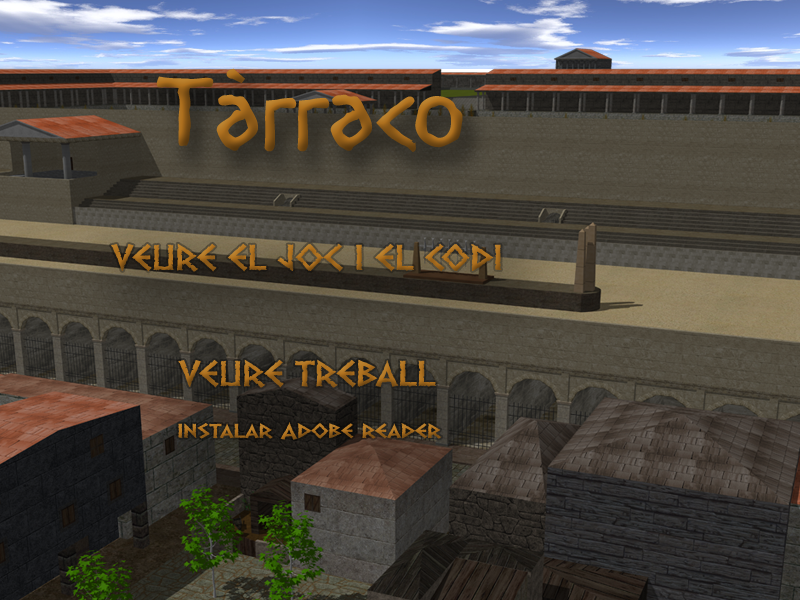
<style>
.page{position:relative;width:800px;height:600px}
.page>*{position:absolute;margin:0}
.t1{font:96.4px "Diogenes"}
.t2{font:86.8px "Diogenes"}
.t3{font:30.3px "Dalek";letter-spacing:-0.05em;color:#ad6f1e;scale:1.25 1}
.t4{font:19.6px "Dalek";letter-spacing:-0.05em;color:#ad6f1e;scale:1.42 1}
</style>
<div class="page">
<p class="t1" style="left:156px;top:68px;width:307px;height:84px"><span class="t2">T</span>àrraco</p>
<p class="t3" style="left:111px;top:243px;width:391px;height:29px">VEURE EL JOC I EL CODI</p>
<p class="t3" style="left:178px;top:359px;width:258px;height:29px">VEURE TREBALL</p>
<p class="t4" style="left:178px;top:422px;width:264px;height:18px">instalar Adobe reader</p>
</div>
